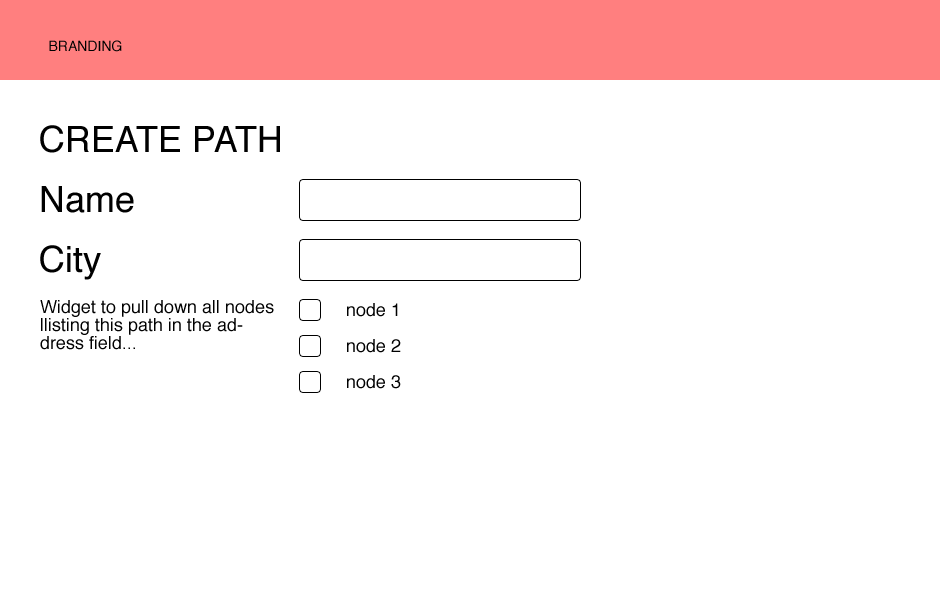
<style>
.page{position:relative;width:940px;height:600px;background:#ffffff}
.page>*{position:absolute;margin:0}
.t1{font:14px "Helvetica";color:#000000}
.t2{font:36px "Helvetica";color:#000000;text-transform:uppercase}
.t3{font:36px/60px "Helvetica";color:#000000}
.t4{font:18px/18px "Helvetica";color:#000000}
.t5{font:18px/36px "Helvetica";color:#000000}
</style>
<div class="page">
<p class="t1" style="left:49px;top:40px;width:73px;height:12px">BRANDING</p>
<p class="t2" style="left:40px;top:125px;width:240px;height:28px">CreaTE Path</p>
<p class="t3" style="left:40px;top:186px;width:94px;height:94px">Name<br>City</p>
<p class="t4" style="left:40px;top:300px;width:234px;height:50px">Widget to pull down all nodes llisting this path in the address field...</p>
<p class="t5" style="left:347px;top:303px;width:54px;height:86px">node 1<br>node 2<br>node 3</p>
</div>
